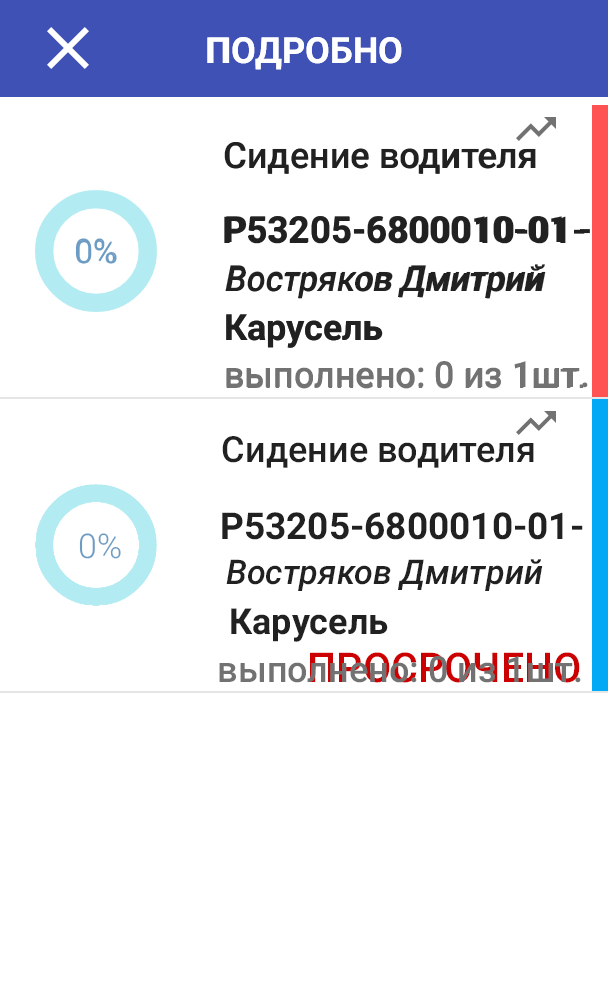
<style>
.page{position:relative;width:609px;height:998px;background:#ffffff}
.page>*{position:absolute;margin:0}
.t1{font:36px "Roboto-Bold";color:#ffffff}
.t2{font:36px "Roboto-Medium";color:#212121}
.t3{font:37px "Roboto-Bold";color:#212121}
.t4{font:34px "Roboto-Light";color:#6c9cc4}
.t5{font:34px "Roboto-MediumItalic";color:#212121}
.t6{font:36px "Roboto-Bold";color:#212121}
.t7{font:36px "Roboto-Medium";color:#727272}
.t8{font:41px "Roboto-Medium";color:#cc0000}
</style>
<div class="page">
<p class="t1" style="left:207px;top:37px;width:195px;height:33px">ПОДРОБНО</p>
<p class="t2" style="left:224px;top:142px;width:312px;height:32px">Сидение водителя</p>
<p class="t3" style="left:224px;top:216px;width:361px;height:28px">Р53205-6800010-01-</p>
<p class="t4" style="left:75px;top:238px;width:42px;height:26px">0%</p>
<p class="t5" style="left:226px;top:266px;width:317px;height:32px">Востряков Дмитрий</p>
<p class="t6" style="left:226px;top:314px;width:157px;height:34px">Карусель</p>
<p class="t7" style="left:226px;top:361px;width:362px;height:27px">выполнено: 0 из 1шт.</p>
<p class="t2" style="left:222px;top:436px;width:312px;height:32px">Сидение водителя</p>
<p class="t3" style="left:222px;top:512px;width:361px;height:28px">Р53205-6800010-01-</p>
<p class="t4" style="left:79px;top:533px;width:42px;height:26px">0%</p>
<p class="t5" style="left:226px;top:559px;width:317px;height:32px">Востряков Дмитрий</p>
<p class="t6" style="left:231px;top:608px;width:157px;height:34px">Карусель</p>
<p class="t8" style="left:310px;top:652px;width:270px;height:31px">ПРОСРОЧЕНО</p>
<p class="t7" style="left:219px;top:656px;width:362px;height:27px">выполнено: 0 из 1шт.</p>
</div>
